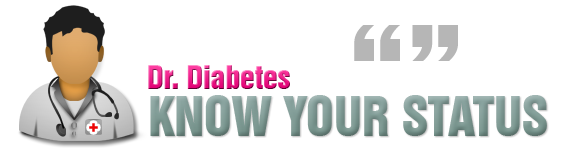
<style>
.page{position:relative;width:574px;height:150px;background:#ffffff}
.page>*{position:absolute;margin:0}
.t1{font:130px "Swiss921BT-RegularA";color:#b6b6b6}
.t2{font:30px "Swiss921BT-RegularA"}
.t3{font:50px "Swiss921BT-RegularA";color:#7f9a94}
.t4{font:15.4px "Arial-Black";color:#ec0404}
</style>
<div class="page">
<p class="t1" style="left:354px;top:25px;width:104px;height:36px">“”</p>
<p class="t2" style="left:148px;top:65px;width:142px;height:24px">Dr. Diabetes</p>
<p class="t3" style="left:150px;top:95px;width:397px;height:41px">KNOW YOUR STATUS</p>
<p class="t4" style="left:89px;top:123px;width:9px;height:9px">+</p>
</div>
